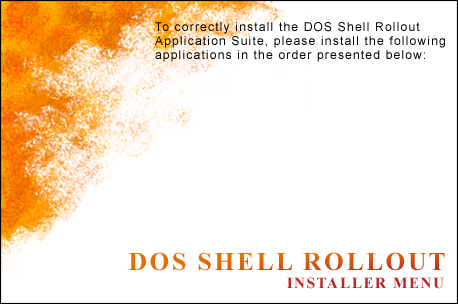
<style>
.page{position:relative;width:458px;height:304px;background:#ffffff}
.page>*{position:absolute;margin:0}
.t1{font:12px "ArialMT";letter-spacing:0.1em;color:#000000}
.t2{font:25.5px "TimesNewRomanPS-BoldMT";letter-spacing:0.1em}
.t3{font:15.3px "TimesNewRomanPS-BoldMT";letter-spacing:0.1em}
</style>
<div class="page">
<p class="t1" style="left:155px;top:22px;width:290px;height:40px">To correctly install the DOS Shell Rollout Application Suite, please install the following applications in the order presented below:</p>
<p class="t2" style="left:128px;top:252px;width:317px;height:37px;text-align:right">DOS SHELL ROLLOUT <br><span class="t3">INSTALLER MENU</span></p>
</div>
